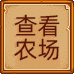
<style>
.page{position:relative;width:74px;height:74px;background:#daad72}
.page>*{position:absolute;margin:0}
.t1{font:24px/24px "AlibabaPuHuiTi-Regular";color:#56160c}
</style>
<div class="page">
<p class="t1" style="left:14px;top:14px;width:46px;height:47px;text-align:center">查看<br>农场</p>
</div>
